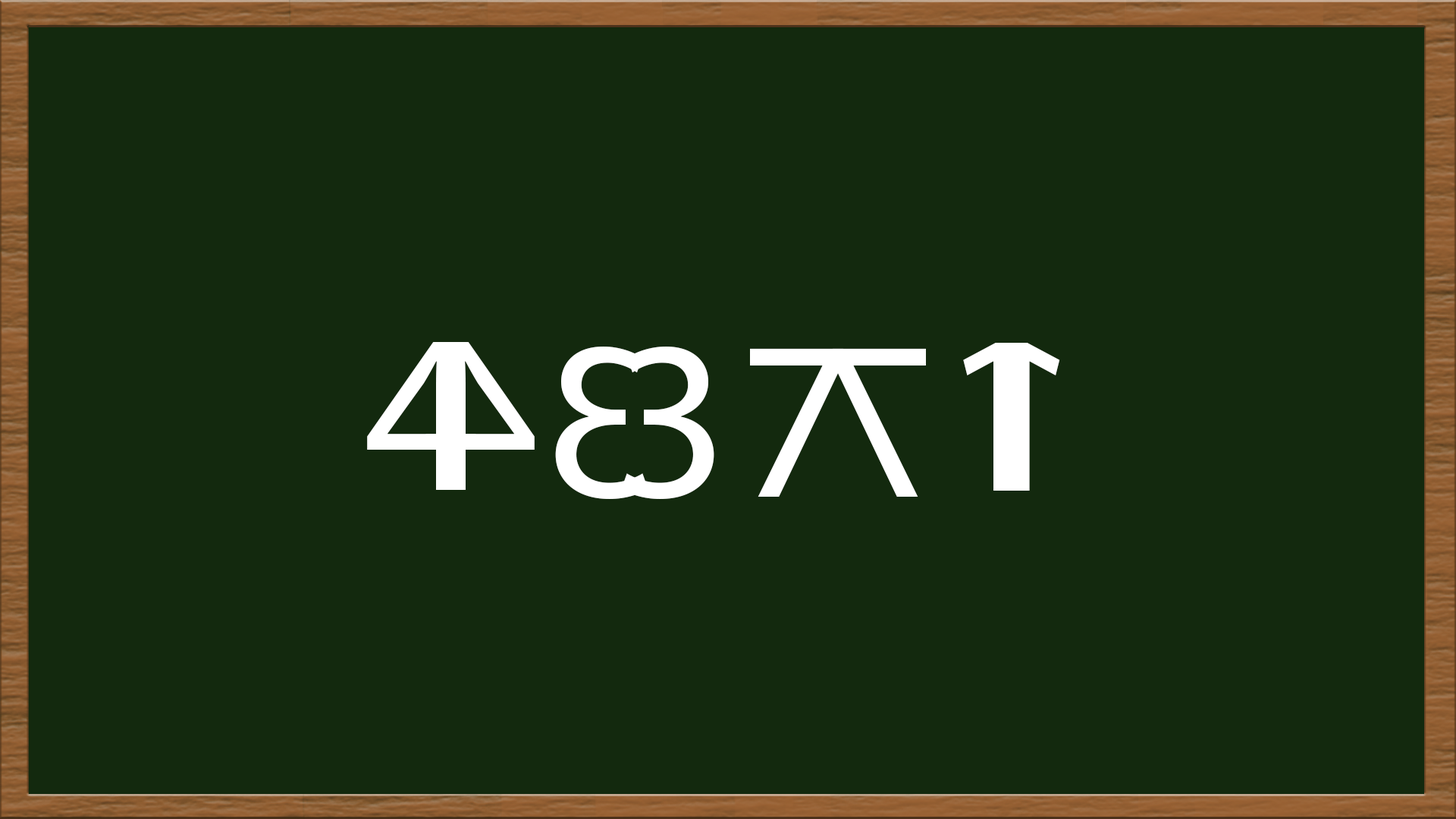
<style>
.page{position:relative;width:1456px;height:819px;background:#13290e}
.page>*{position:absolute;margin:0}
.t1{font:227.5px "MyriadPro-Regular";color:#ffffff}
</style>
<div class="page">
<p class="t1" style="left:367px;top:342px;width:109px;height:148px">4</p>
<p class="t1" style="left:425px;top:342px;width:110px;height:148px;rotate:180deg">4</p>
<p class="t1" style="left:555px;top:347px;width:93px;height:152px;rotate:180deg">3</p>
<p class="t1" style="left:621px;top:347px;width:93px;height:152px">3</p>
<p class="t1" style="left:963px;top:343px;width:50px;height:148px">1</p>
<p class="t1" style="left:1010px;top:343px;width:50px;height:148px;rotate:180deg">1</p>
</div>
